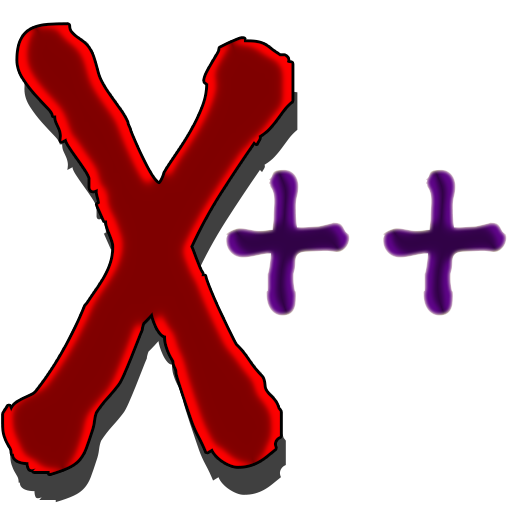
<style>
.page{position:relative;width:512px;height:512px;background:#ffffff}
.page>*{position:absolute;margin:0}
.t1{font:623.4px "SegoeMarker"}
.t2{font:300px "SegoeMarker"}
</style>
<div class="page">
<p class="t1" style="left:4px;top:25px;width:288px;height:449px">X</p>
<p class="t2" style="left:226px;top:169px;width:281px;height:147px">++</p>
</div>
